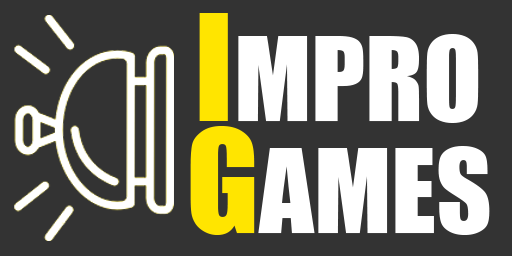
<style>
.page{position:relative;width:512px;height:256px;background:#333333}
.page>*{position:absolute;margin:0}
.t1{font:107.9px "Impact";color:#ffffff}
.t2{font:107.9px "Impact";color:#009ac0}
.t3{font:137.1px "Impact";color:#ffe500}
.t4{font:133.3px "Impact";color:#ffe500}
</style>
<div class="page">
<p class="t1" style="left:199px;top:13px;width:280px;height:110px"><span class="t2"> </span><span class="t3">I</span>MPRO</p>
<p class="t1" style="left:190px;top:126px;width:300px;height:109px"><span class="t2">  </span><span class="t4">G</span>AMES</p>
</div>
